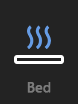
<style>
.page{position:relative;width:78px;height:104px;background:#232323}
.page>*{position:absolute;margin:0}
.t1{font:14px "SegoeUI";color:#7c7c7c;font-weight:bold}
</style>
<div class="page">
<p class="t1" style="left:27px;top:82px;width:24px;height:11px">Bed</p>
</div>
